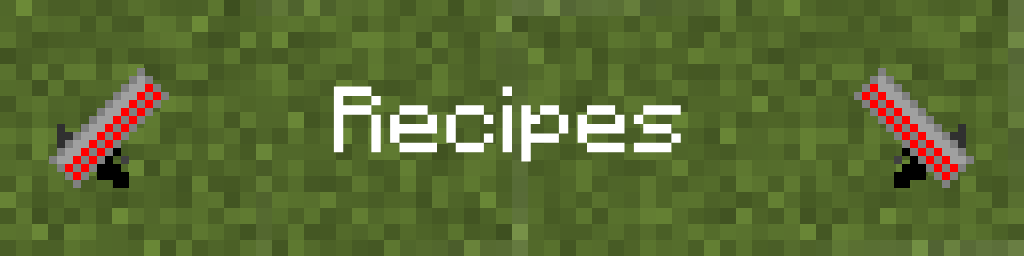
<style>
.page{position:relative;width:1024px;height:256px}
.page>*{position:absolute;margin:0}
.t1{font:75px "Minecraftia-Regular";color:#ffffff}
</style>
<div class="page">
<p class="t1" style="left:333px;top:86px;width:348px;height:76px">Recipes</p>
</div>
